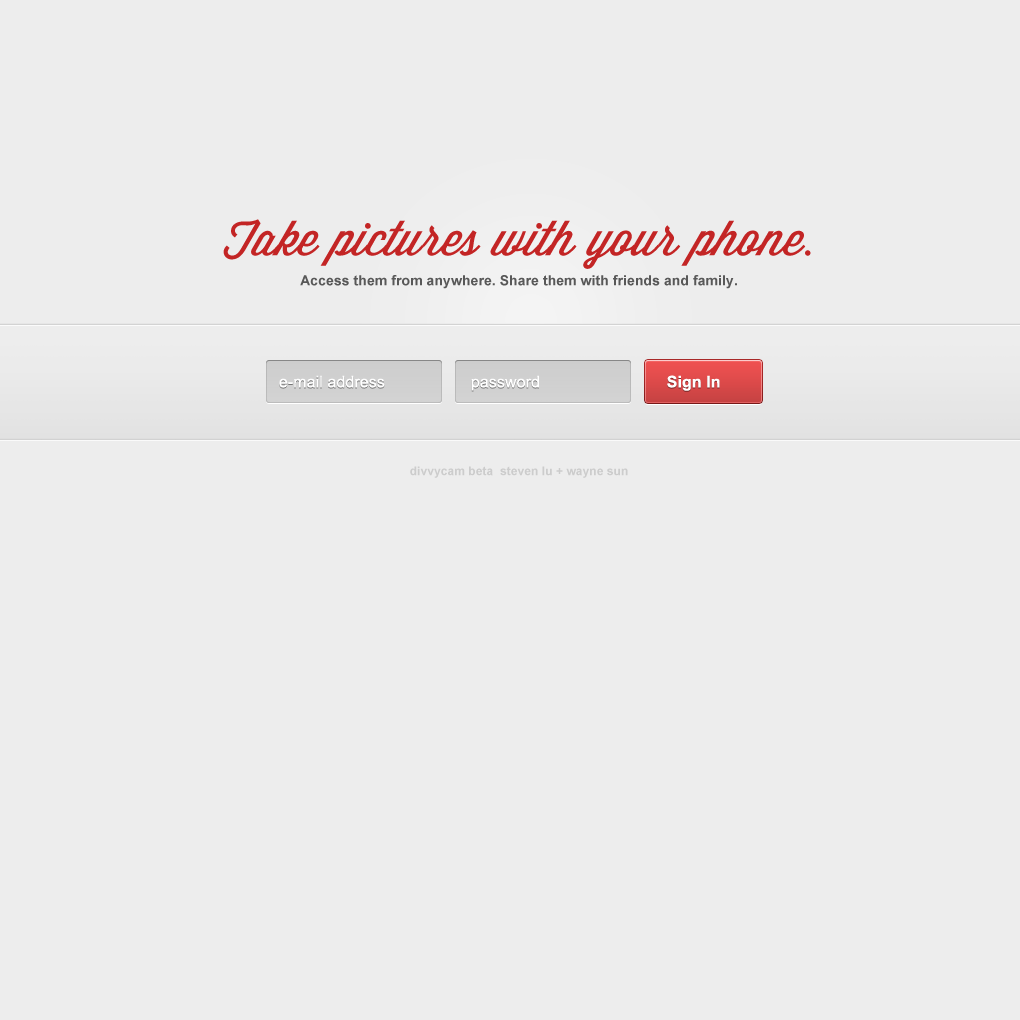
<style>
.page{position:relative;width:1020px;height:1020px;background:#ededed}
.page>*{position:absolute;margin:0}
.t1{font:14px/30px "Arial-BoldMT";letter-spacing:0.005em;color:#585858}
.t2{font:48px/30px "WisdomScriptAI";letter-spacing:0.005em;color:#c32525}
.t3{font:12px/10px "Arial-BoldMT";letter-spacing:0.005em;color:#cccccc}
.t4{font:12px/30px "Arial-BoldMT";letter-spacing:0.005em;color:#cccccc}
.t5{font:16px "ArialMT";letter-spacing:0.005em;color:#ffffff}
.t6{font:16px "Arial-BoldMT";letter-spacing:0.005em;color:#fefefe}
</style>
<div class="page">
<p class="t1" style="left:223px;top:219px;width:588px;height:259px;text-align:center"><span class="t2">Take pictures with your phone.<br></span>Access them from anywhere. Share them with friends and family.<br><br><br><br><br><span class="t3"><br><br><br><br>divvycam beta  steven lu + wayne su</span><span class="t4">n</span></p>
<p class="t5" style="left:279px;top:375px;width:441px;height:16px">e-mail address                   password                        <span class="t6">    Sign In</span></p>
</div>
